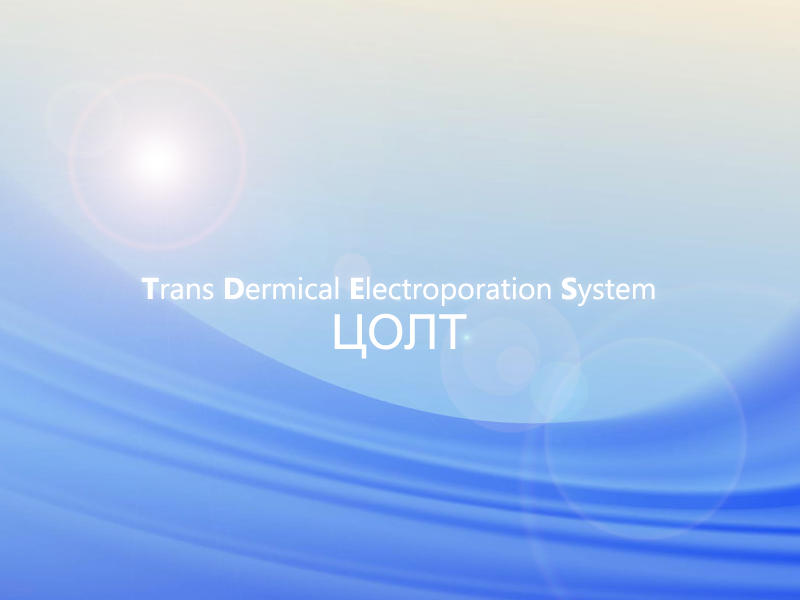
<style>
.page{position:relative;width:800px;height:600px}
.page>*{position:absolute;margin:0}
.t1{font:30px "SegoeUI";color:#ffffff}
.t2{font:30px "SegoeUI-Bold";color:#ffffff}
.t3{font:48px "MicrosoftSansSerif";color:#ffffff}
</style>
<div class="page">
<p class="t1" style="left:141px;top:276px;width:514px;height:31px"><span class="t2">T</span>rans <span class="t2">D</span>ermical <span class="t2">E</span>lectroporation <span class="t2">S</span>ystem</p>
<p class="t3" style="left:334px;top:313px;width:133px;height:46px">ЦОЛТ</p>
</div>
